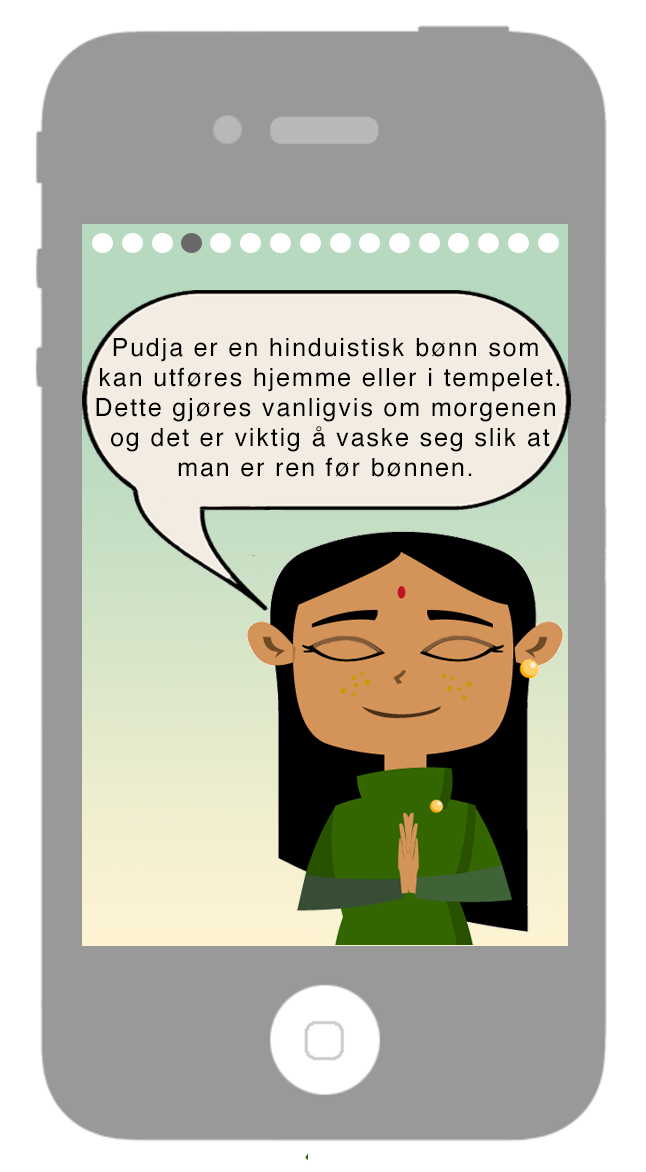
<style>
.page{position:relative;width:646px;height:1172px;background:#999999}
.page>*{position:absolute;margin:0}
.t1{font:25px "Helvetica";letter-spacing:0.075em;color:#000000}
</style>
<div class="page">
<p class="t1" style="left:96px;top:338px;width:463px;height:139px;text-align:center">Pudja er en hinduistisk bønn som<br> kan utføres hjemme eller i tempelet.<br>Dette gjøres vanligvis om morgenen<br> og det er viktig å vaske seg slik at<br>man er ren før bønnen.</p>
</div>
